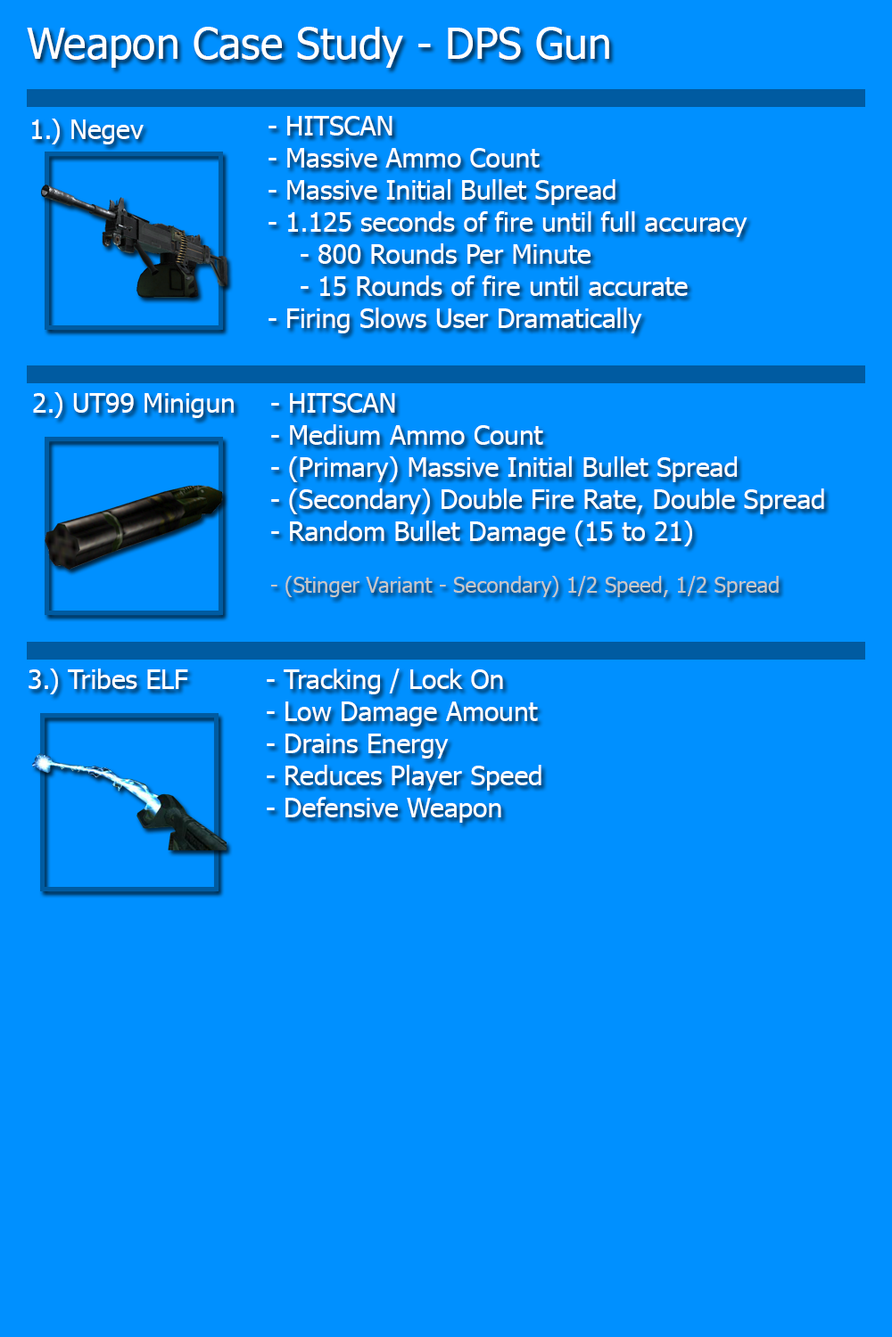
<style>
.page{position:relative;width:892px;height:1337px;background:#0090ff}
.page>*{position:absolute;margin:0}
.t1{font:42.8px "Tahoma";color:#ffffff}
.t2{font:26.7px "Tahoma";color:#ffffff}
.t3{font:21.4px "Tahoma";color:#c8c8c8}
</style>
<div class="page">
<p class="t1" style="left:27px;top:27px;width:582px;height:41px">Weapon Case Study - DPS Gun</p>
<p class="t2" style="left:32px;top:119px;width:112px;height:25px">1.) Negev</p>
<p class="t2" style="left:268px;top:116px;width:479px;height:217px;text-align:right">- HITSCAN<br>- Massive Ammo Count<br>- Massive Initial Bullet Spread<br>- 1.125 seconds of fire until full accuracy<br> - 800 Rounds Per Minute<br> - 15 Rounds of fire until accurate<br>- Firing Slows User Dramatically</p>
<p class="t2" style="left:33px;top:392px;width:201px;height:26px">2.) UT99 Minigun</p>
<p class="t2" style="left:271px;top:393px;width:553px;height:204px;text-align:right">- HITSCAN<br>- Medium Ammo Count<br>- (Primary) Massive Initial Bullet Spread<br>- (Secondary) Double Fire Rate, Double Spread<br>- Random Bullet Damage (15 to 21)<br><span class="t3"><br>- (Stinger Variant - Secondary) 1/2 Speed, 1/2 Spread</span></p>
<p class="t2" style="left:29px;top:669px;width:159px;height:26px">3.) Tribes ELF</p>
<p class="t2" style="left:267px;top:669px;width:274px;height:154px;text-align:right">- Tracking / Lock On<br>- Low Damage Amount<br>- Drains Energy<br>- Reduces Player Speed<br>- Defensive Weapon</p>
</div>
